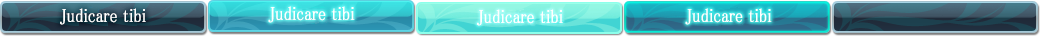
<style>
.page{position:relative;width:1040px;height:37px}
.page>*{position:absolute;margin:0}
.t1{font:19px "MS-PMincho";color:#ffffff;font-weight:bold;scale:0.84 1}
</style>
<div class="page">
<p class="t1" style="left:268px;top:6px;width:87px;height:17px">Judicare tibi</p>
<p class="t1" style="left:60px;top:8px;width:86px;height:17px">Judicare tibi</p>
<p class="t1" style="left:477px;top:9px;width:86px;height:17px">Judicare tibi</p>
<p class="t1" style="left:685px;top:8px;width:87px;height:17px">Judicare tibi</p>
</div>
